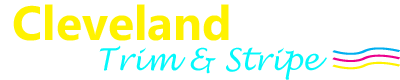
<style>
.page{position:relative;width:400px;height:80px;background:#ffffff}
.page>*{position:absolute;margin:0}
.t1{font:48px "MicrosoftPhagsPa-Bold";color:#fff200}
.t2{font:30px "LucidaHandwriting-Italic";color:#04f8fb}
</style>
<div class="page">
<p class="t1" style="left:13px;top:4px;width:216px;height:37px">Cleveland</p>
<p class="t2" style="left:99px;top:45px;width:228px;height:35px">Trim &amp; Stripe</p>
</div>
